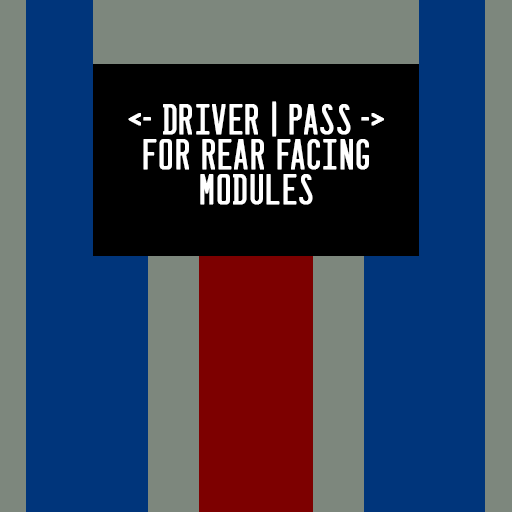
<style>
.page{position:relative;width:512px;height:512px;background:#00357b}
.page>*{position:absolute;margin:0}
.t1{font:38px/35px "DealerplateCalifornia-Regular";letter-spacing:0.025em;color:#ffffff;font-weight:bold}
</style>
<div class="page">
<p class="t1" style="left:128px;top:101px;width:256px;height:104px;text-align:center">&lt;- DRIVER | PASS -&gt;<br>FOR REAR FACING<br>MODULES</p>
</div>
